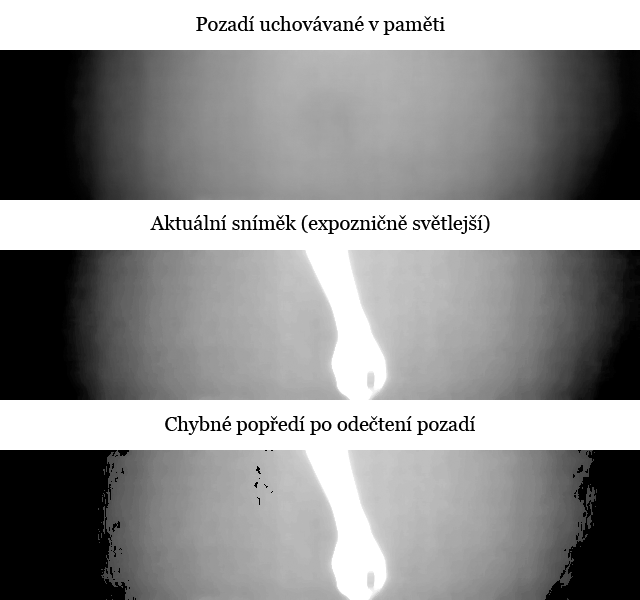
<style>
.page{position:relative;width:640px;height:600px;background:#ffffff}
.page>*{position:absolute;margin:0}
.t1{font:20px "Georgia";color:#000000}
</style>
<div class="page">
<p class="t1" style="left:196px;top:16px;width:249px;height:19px">Pozadí uchovávané v paměti</p>
<p class="t1" style="left:150px;top:215px;width:340px;height:19px">Aktuální sníměk (expozničně světlejší)</p>
<p class="t1" style="left:165px;top:416px;width:310px;height:19px">Chybné popředí po odečtení pozadí</p>
</div>
